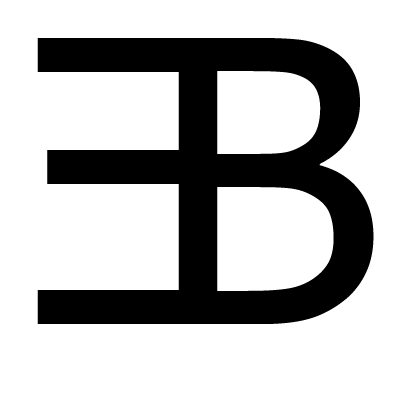
<style>
.page{position:relative;width:400px;height:400px;background:#ffffff}
.page>*{position:absolute;margin:0}
.t1{font:394.4px "Tahoma";letter-spacing:0.1em;color:#000000}
</style>
<div class="page">
<p class="t1" style="left:37px;top:38px;width:180px;height:286px;rotate:180deg">E</p>
<p class="t1" style="left:179px;top:38px;width:195px;height:286px">B</p>
</div>
